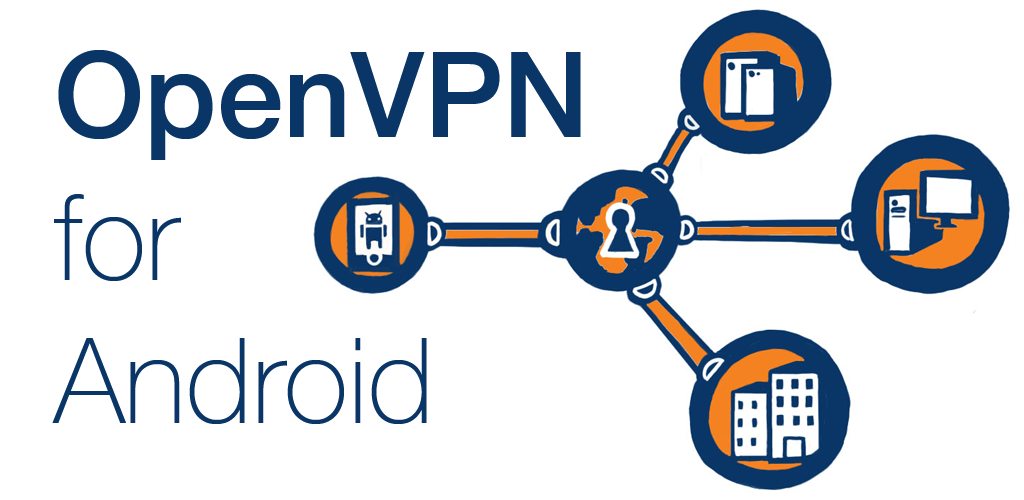
<style>
.page{position:relative;width:1024px;height:500px;background:#ffffff}
.page>*{position:absolute;margin:0}
.t1{font:119px "HelveticaNeue-Thin";color:#0a3667}
.t2{font:119px "HelveticaNeue-Medium";color:#0a3667}
</style>
<div class="page">
<p class="t1" style="left:52px;top:50px;width:529px;height:374px"><span class="t2">OpenVPN<br></span>for<br>Android</p>
</div>
